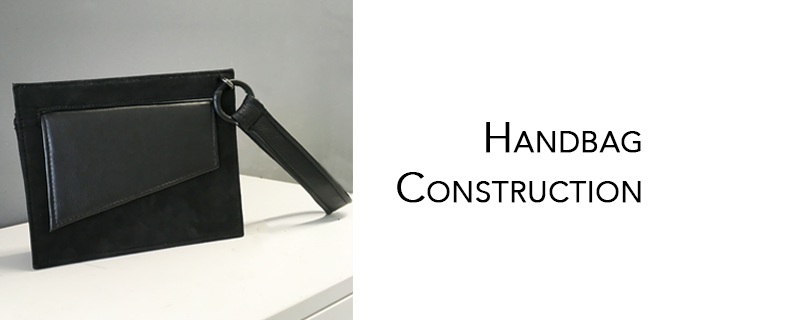
<style>
.page{position:relative;width:805px;height:320px;background:#ffffff}
.page>*{position:absolute;margin:0}
.t1{font:41.7px "Avenir-Light";color:#000000;font-variant:small-caps;font-weight:bold}
</style>
<div class="page">
<p class="t1" style="left:397px;top:122px;width:244px;height:81px;text-align:right">Handbag<br>Construction</p>
</div>
